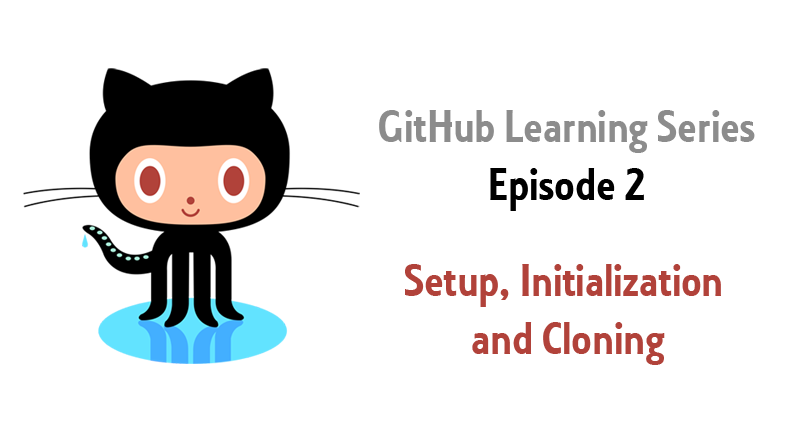
<style>
.page{position:relative;width:790px;height:444px;background:#ffffff}
.page>*{position:absolute;margin:0}
.t1{font:48px "Collegiate";color:#8c8c8c}
.t2{font:48px "Collegiate";color:#000000}
.t3{font:48px "Collegiate";color:#b1423a}
</style>
<div class="page">
<p class="t1" style="left:379px;top:110px;width:376px;height:101px;text-align:center">GitHub Learning Series<br><span class="t2">Episode 2</span></p>
<p class="t3" style="left:405px;top:264px;width:316px;height:101px;text-align:center">Setup, Initialization <br>and Cloning</p>
</div>
